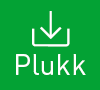
<style>
.page{position:relative;width:100px;height:90px;background:#03a234}
.page>*{position:absolute;margin:0}
.t1{font:28.6px "DIN-Regular";color:#ffffff}
</style>
<div class="page">
<p class="t1" style="left:16px;top:54px;width:70px;height:21px">Plukk</p>
</div>
